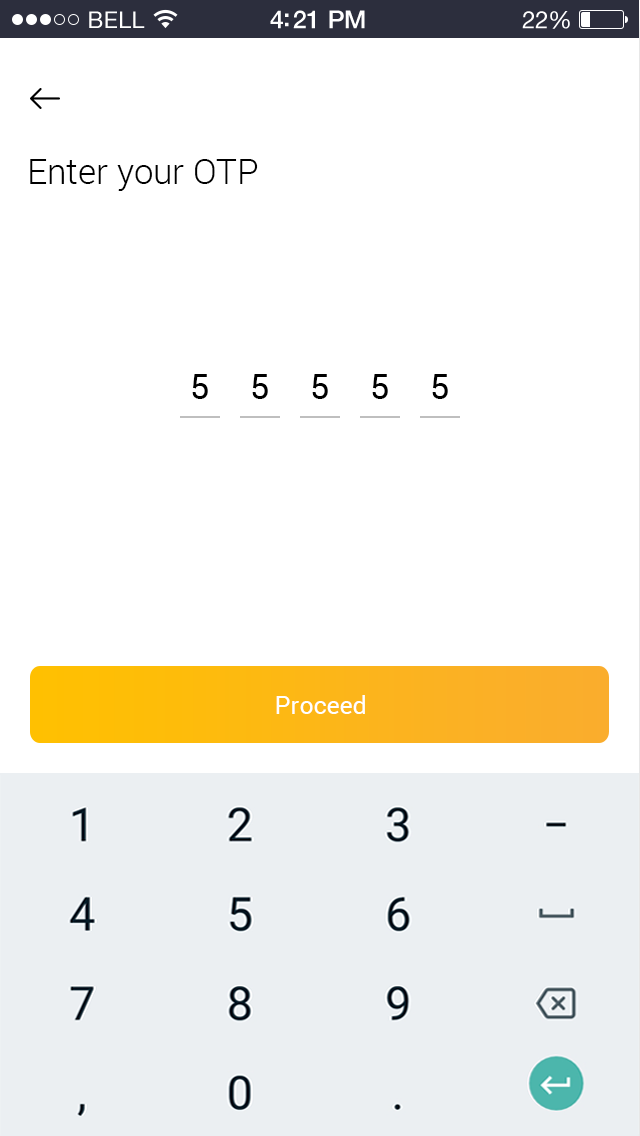
<style>
.page{position:relative;width:640px;height:1136px;background:#ffffff}
.page>*{position:absolute;margin:0}
.t1{font:35px "Roboto-Light";color:#000000}
.t2{font:35px "Roboto-Regular";color:#000000}
.t3{font:25px "Roboto-Regular";color:#ffffff}
</style>
<div class="page">
<p class="t1" style="left:30px;top:159px;width:228px;height:32px">Enter your OTP</p>
<p class="t2" style="left:192px;top:374px;width:16px;height:25px">5</p>
<p class="t2" style="left:252px;top:374px;width:16px;height:25px">5</p>
<p class="t2" style="left:312px;top:374px;width:16px;height:25px">5</p>
<p class="t2" style="left:372px;top:374px;width:16px;height:25px">5</p>
<p class="t2" style="left:432px;top:374px;width:16px;height:25px">5</p>
<p class="t3" style="left:276px;top:695px;width:89px;height:19px">Proceed</p>
</div>
